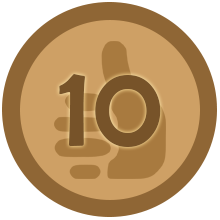
<style>
.page{position:relative;width:220px;height:220px;background:#cea065}
.page>*{position:absolute;margin:0}
.t1{font:120px "BerlinSansFB-Reg";color:#775329}
</style>
<div class="page">
<p class="t1" style="left:59px;top:74px;width:102px;height:73px">10</p>
</div>
